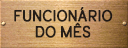
<style>
.page{position:relative;width:128px;height:48px}
.page>*{position:absolute;margin:0}
.t1{font:15.4px/16px "Grovana-MediumRough";color:#161211;font-weight:bold;scale:0.91 1}
</style>
<div class="page">
<p class="t1" style="left:14px;top:7px;width:99px;height:31px;text-align:center;opacity:0.96">FUNCIONÁRIO<br>DO MÊS</p>
</div>
